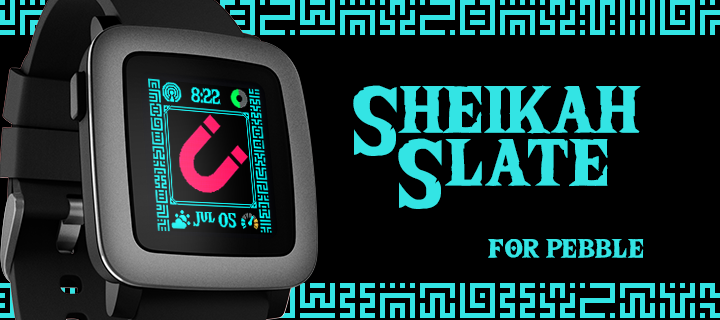
<style>
.page{position:relative;width:720px;height:320px;background:#000000}
.page>*{position:absolute;margin:0}
.t1{font:100px "TheWildBreathofZelda";color:#33e4e4}
.t2{font:40px "TheWildBreathofZelda";color:#33e4e4}
</style>
<div class="page">
<p class="t1" style="left:353px;top:85px;width:288px;height:71px">Sheikah</p>
<p class="t1" style="left:398px;top:138px;width:210px;height:71px">Slate</p>
<p class="t2" style="left:488px;top:239px;width:156px;height:19px">for pebble</p>
</div>
